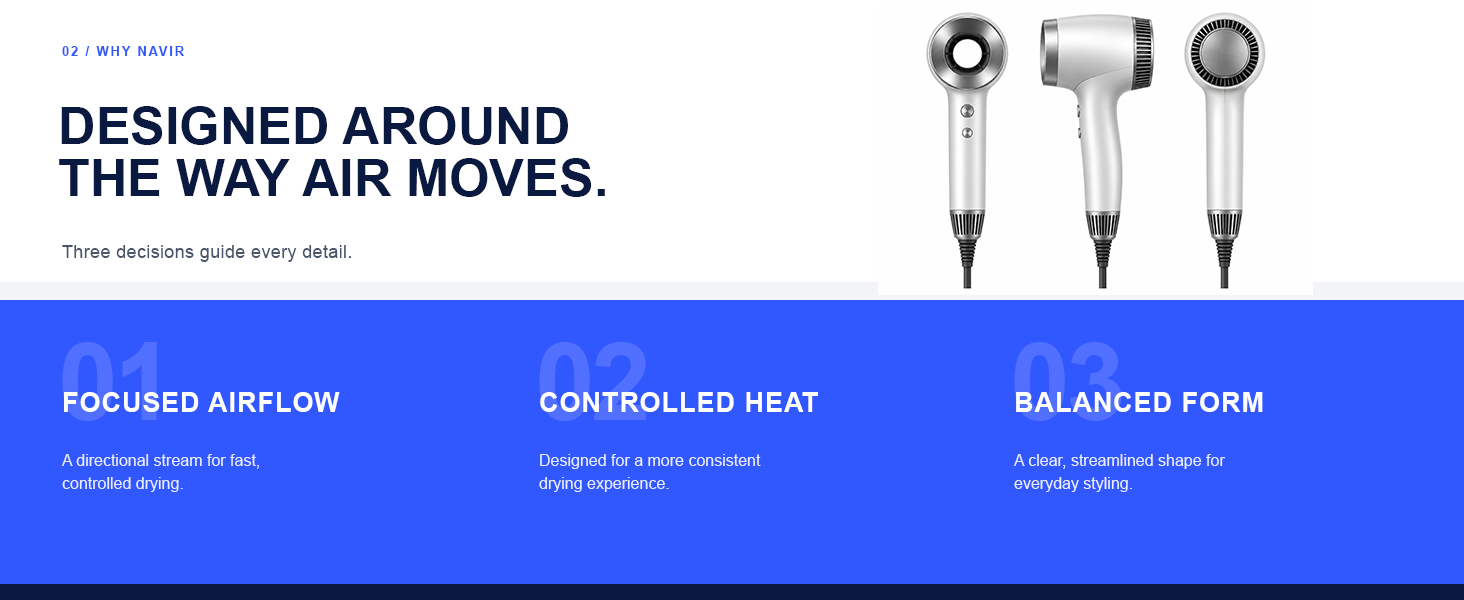
<style>
.page{position:relative;width:1464px;height:600px;background:#3157ff}
.page>*{position:absolute;margin:0}
.t1{font:13px "Arial-BoldMT";letter-spacing:0.14em;color:#3157ff}
.t2{font:52px/52px "Arial-BoldMT";color:#0a1940}
.t3{font:18px "ArialMT";letter-spacing:0.02em;color:#4c566a}
.t4{font:27px "Arial-BoldMT";letter-spacing:0.035em;color:#ffffff}
.t5{font:16px/23px "ArialMT";color:#e8edff}
</style>
<div class="page">
<p class="t1" style="left:62px;top:46px;width:122px;height:10px">02 / WHY NAVIR</p>
<p class="t2" style="left:59px;top:106px;width:546px;height:91px">DESIGNED AROUND<br>THE WAY AIR MOVES.</p>
<p class="t3" style="left:62px;top:245px;width:289px;height:17px">Three decisions guide every detail.</p>
<p class="t4" style="left:64px;top:392px;width:276px;height:20px">FOCUSED AIRFLOW</p>
<p class="t4" style="left:540px;top:392px;width:278px;height:20px">CONTROLLED HEAT</p>
<p class="t4" style="left:1016px;top:392px;width:247px;height:20px">BALANCED FORM</p>
<p class="t5" style="left:62px;top:454px;width:197px;height:38px">A directional stream for fast,<br>controlled drying.</p>
<p class="t5" style="left:539px;top:454px;width:222px;height:38px">Designed for a more consistent<br>drying experience.</p>
<p class="t5" style="left:1014px;top:454px;width:211px;height:38px">A clear, streamlined shape for<br>everyday styling.</p>
</div>
